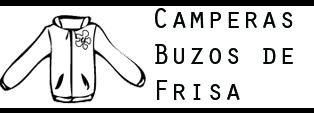
<style>
.page{position:relative;width:314px;height:113px;background:#ffffff}
.page>*{position:absolute;margin:0}
.t1{font:30px "OratorStd";color:#060808}
</style>
<div class="page">
<p class="t1" style="left:155px;top:8px;width:138px;height:92px">Camperas<br>Buzos de<br>Frisa</p>
</div>
